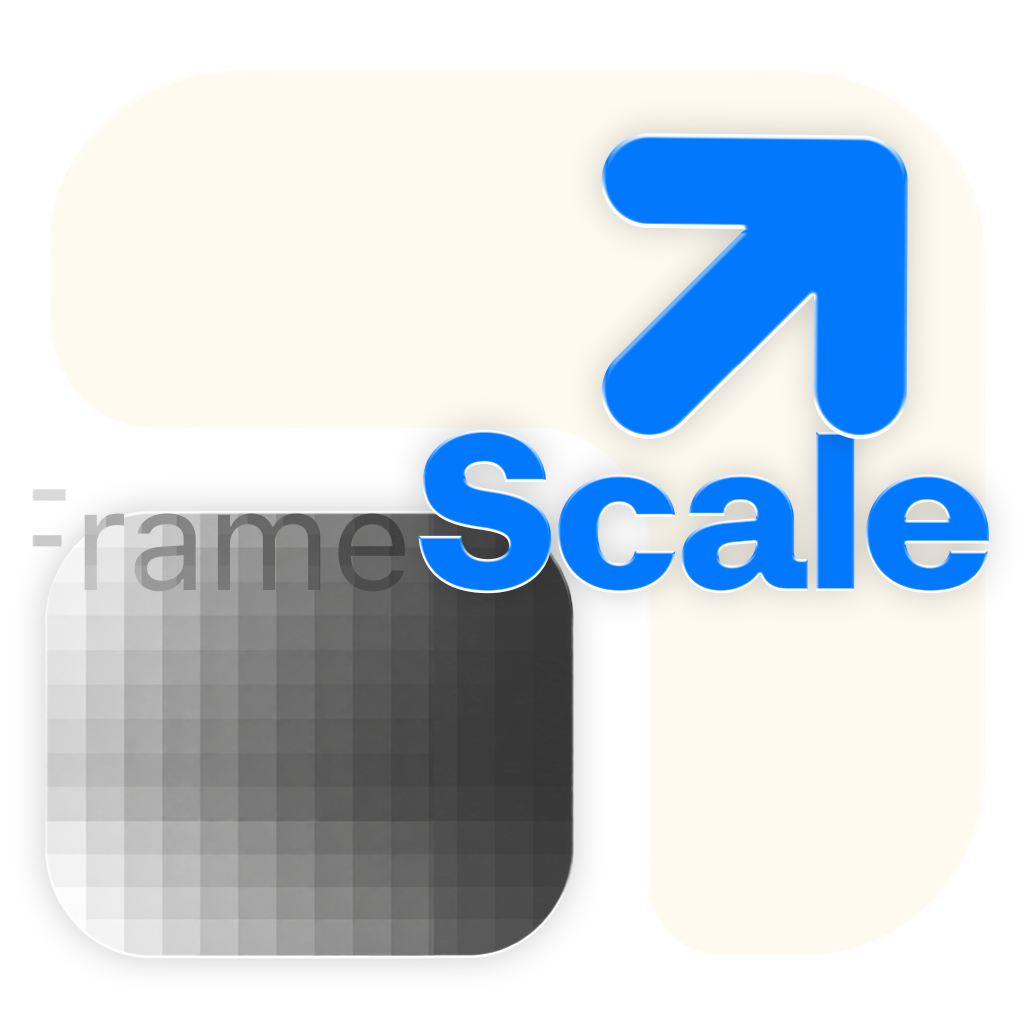
<style>
.page{position:relative;width:1024px;height:1024px;background:#fefaef}
.page>*{position:absolute;margin:0}
.t1{font:212px "AnthropicSansDisplay-Black";color:#0279fd}
.t2{font:142.8px "SFProText-Regular"}
</style>
<div class="page">
<p class="t1" style="left:417px;top:429px;width:573px;height:166px">Scale</p>
<p class="t2" style="left:3px;top:489px;width:403px;height:104px">Frame</p>
</div>
